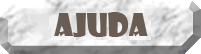
<style>
.page{position:relative;width:201px;height:54px}
.page>*{position:absolute;margin:0}
.t1{font:30px "ShowcardGothic-Reg";color:#685c53}
.t2{font:14px "ShowcardGothic-Reg";color:#1a2732}
</style>
<div class="page">
<p class="t1" style="left:54px;top:12px;width:94px;height:25px"><span class="t2"><br></span>ajuda</p>
</div>
